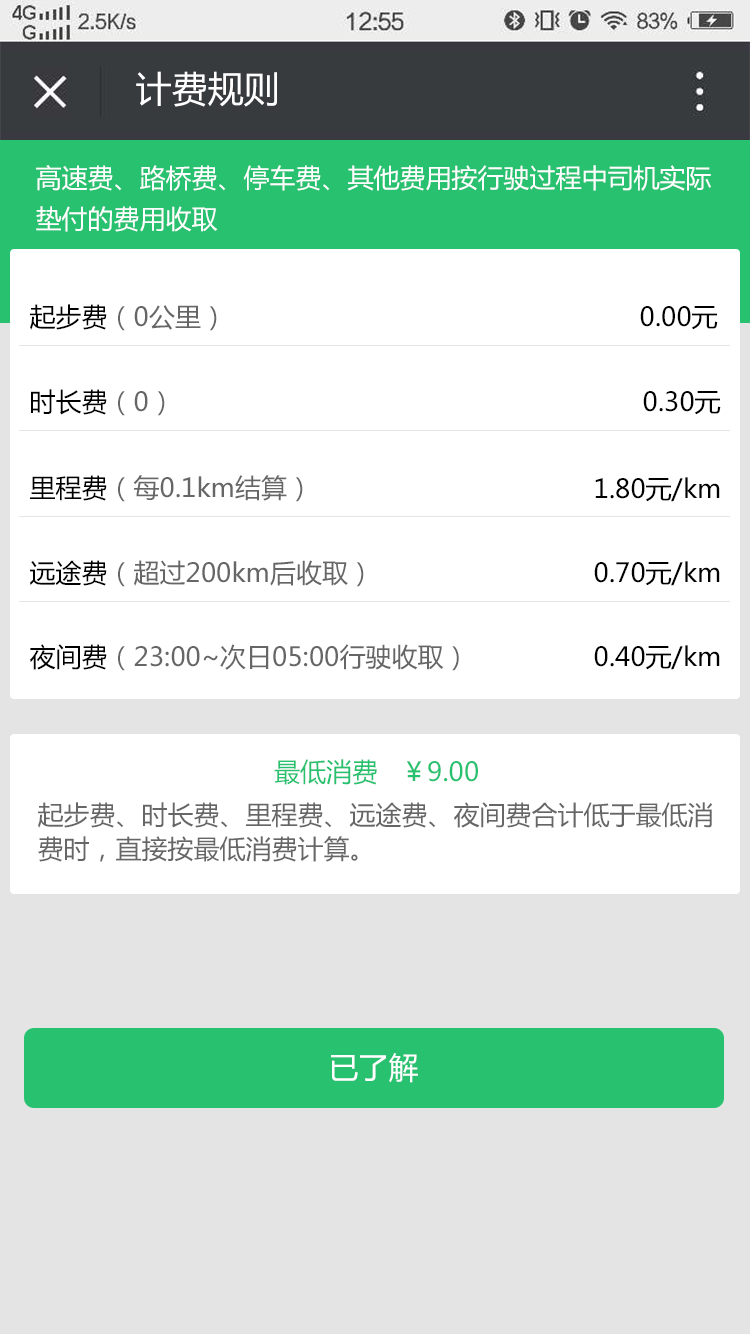
<style>
.page{position:relative;width:750px;height:1334px;background:#ffffff}
.page>*{position:absolute;margin:0}
.t1{font:36px "MicrosoftYaHei";color:#ffffff}
.t2{font:26px/41px "MicrosoftYaHei";color:#ffffff}
.t3{font:26px "MicrosoftYaHei";color:#666666}
.t4{font:26px "MicrosoftYaHei";color:#000000}
.t5{font:26px "MicrosoftYaHei";color:#27c170}
.t6{font:26px/34px "MicrosoftYaHei";color:#666666}
.t7{font:30px "MicrosoftYaHei";color:#ffffff}
</style>
<div class="page">
<p class="t1" style="left:136px;top:71px;width:141px;height:36px">计费规则</p>
<p class="t2" style="left:36px;top:165px;width:675px;height:67px">高速费、路桥费、停车费、其他费用按行驶过程中司机实际<br>垫付的费用收取</p>
<p class="t3" style="left:30px;top:304px;width:187px;height:27px"><span class="t4">起步费</span>（0公里）</p>
<p class="t4" style="left:640px;top:306px;width:78px;height:24px">0.00元</p>
<p class="t4" style="left:31px;top:389px;width:134px;height:27px">时长费<span class="t3">（0）</span></p>
<p class="t4" style="left:643px;top:391px;width:78px;height:24px">0.30元</p>
<p class="t3" style="left:30px;top:475px;width:273px;height:27px"><span class="t4">里程费</span>（每0.1km结算）</p>
<p class="t4" style="left:595px;top:477px;width:125px;height:25px">1.80元/km</p>
<p class="t3" style="left:29px;top:560px;width:335px;height:27px"><span class="t4">远途费</span>（超过200km后收取）</p>
<p class="t4" style="left:594px;top:561px;width:126px;height:25px">0.70元/km</p>
<p class="t3" style="left:30px;top:644px;width:429px;height:27px"><span class="t4">夜间费</span>（23:00~次日05:00行驶收取）</p>
<p class="t4" style="left:594px;top:645px;width:126px;height:25px">0.40元/km</p>
<p class="t5" style="left:274px;top:759px;width:204px;height:26px">最低消费   ￥9.00</p>
<p class="t6" style="left:38px;top:802px;width:675px;height:60px">起步费、时长费、里程费、远途费、夜间费合计低于最低消<br>费时，直接按最低消费计算。</p>
<p class="t7" style="left:331px;top:1053px;width:87px;height:30px">已了解</p>
</div>
